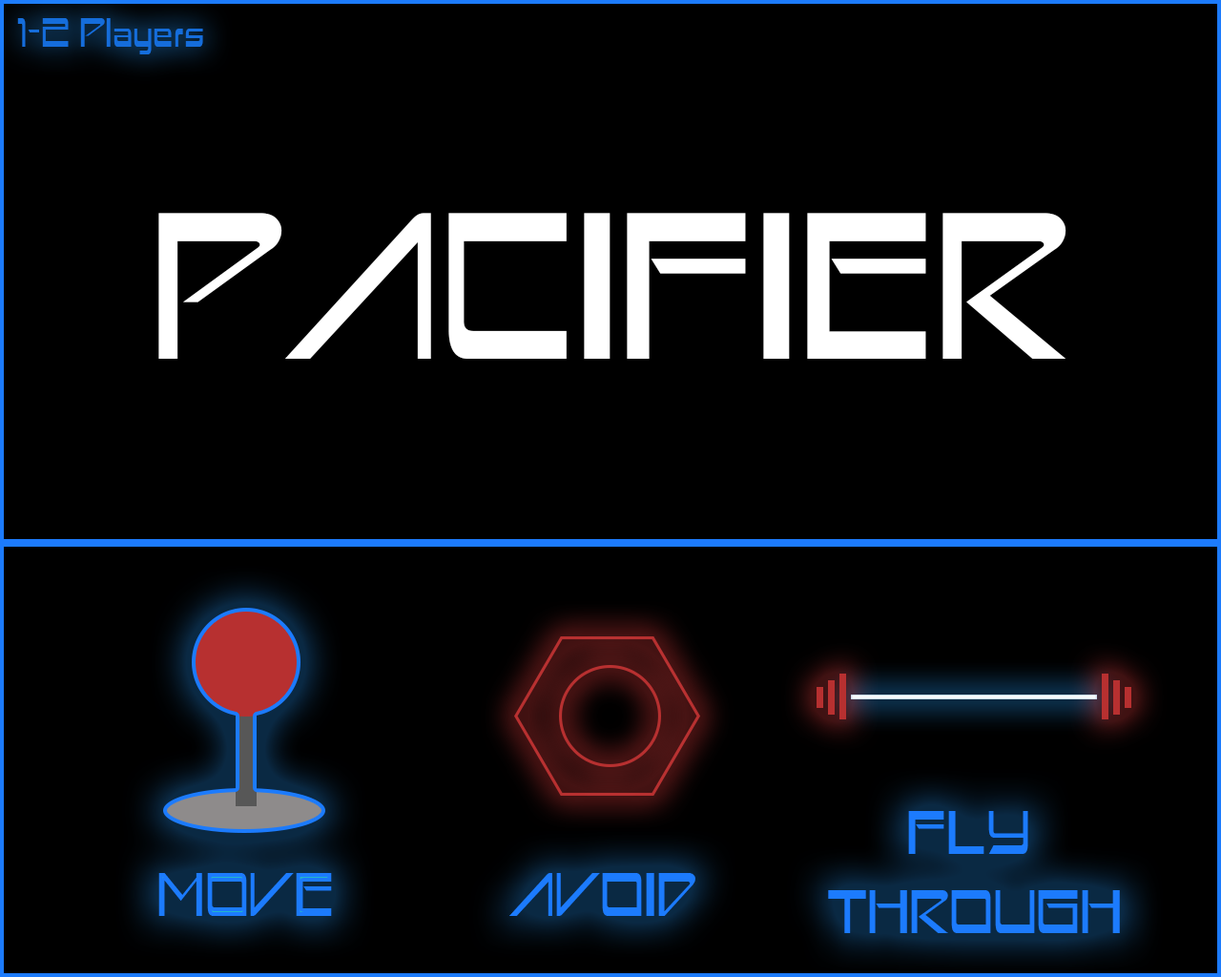
<style>
.page{position:relative;width:1221px;height:977px;background:#000000}
.page>*{position:absolute;margin:0}
.t1{font:43.9px "AstronBoyRg-Regular";color:#156ddb}
.t2{font:226.7px "AstronBoyRg-Regular";color:#ffffff}
.t3{font:66.4px "AstronBoyRg-Regular";color:#1c7bfd}
</style>
<div class="page">
<p class="t1" style="left:17px;top:18px;width:186px;height:36px">1-2 Players</p>
<p class="t2" style="left:158px;top:213px;width:908px;height:146px">PACIFIER</p>
<p class="t3" style="left:828px;top:811px;width:292px;height:122px;text-align:center">FLY <br>THROUGH</p>
<p class="t3" style="left:158px;top:873px;width:174px;height:43px">MOVE</p>
<p class="t3" style="left:509px;top:873px;width:186px;height:43px">AVOID</p>
</div>
